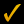
<style>
.page{position:relative;width:24px;height:24px;background:#000000}
.page>*{position:absolute;margin:0}
.t1{font:30px "GaramondPremrPro";color:#e8ab01;font-weight:bold}
</style>
<div class="page">
<p class="t1" style="left:4px;top:4px;width:17px;height:18px">✓</p>
</div>
